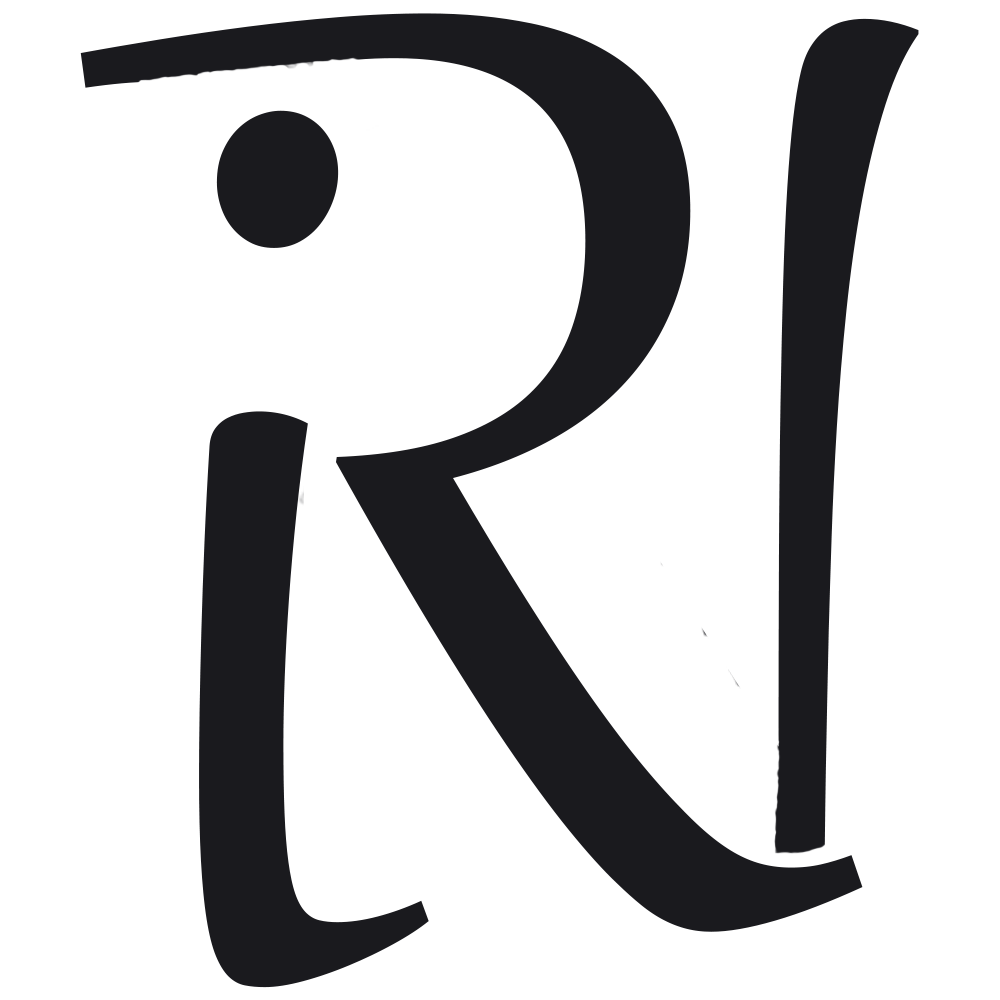
<style>
.page{position:relative;width:1000px;height:1000px;background:#ffffff}
.page>*{position:absolute;margin:0}
.t1{font:1591.4px "Gabriola";color:#1a1a1e}
</style>
<div class="page">
<p class="t1" style="left:80px;top:13px;width:783px;height:919px">R</p>
<p class="t1" style="left:199px;top:110px;width:230px;height:878px">i</p>
</div>
